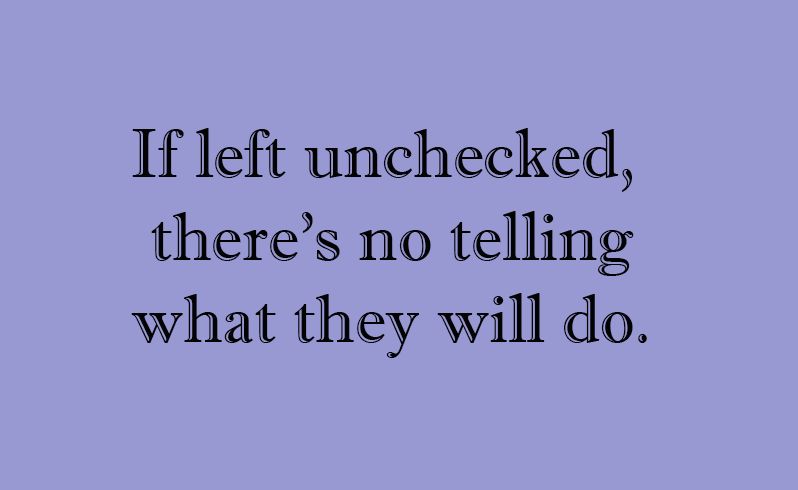
<style>
.page{position:relative;width:798px;height:490px;background:#9898d3}
.page>*{position:absolute;margin:0}
.t1{font:68.7px "ImprintMT-Shadow";color:#030303}
</style>
<div class="page">
<p class="t1" style="left:131px;top:128px;width:516px;height:230px;text-align:center">If left unchecked, <br>there’s no telling<br>what they will do.</p>
</div>
